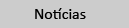
<style>
.page{position:relative;width:129px;height:28px;background:#cccccc}
.page>*{position:absolute;margin:0}
.t1{font:16px "Calibri";color:#000000}
</style>
<div class="page">
<p class="t1" style="left:35px;top:8px;width:51px;height:11px">Notícias</p>
</div>
